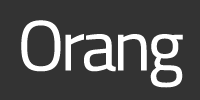
<style>
.page{position:relative;width:200px;height:100px;background:#333333}
.page>*{position:absolute;margin:0}
.t1{font:71.3px "Titillium-Regular";letter-spacing:-0.055em;color:#ffffff}
</style>
<div class="page">
<p class="t1" style="left:21px;top:20px;width:162px;height:68px">Orang</p>
</div>
